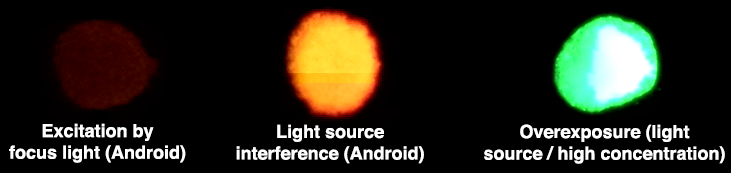
<style>
.page{position:relative;width:731px;height:173px;background:#000000}
.page>*{position:absolute;margin:0}
.t1{font:18px "Helvetica-Bold";color:#ffffff}
</style>
<div class="page">
<p class="t1" style="left:9px;top:123px;width:177px;height:40px;text-align:center">Excitation by<br>focus light (Android)</p>
<p class="t1" style="left:236px;top:124px;width:188px;height:40px;text-align:center">Light source<br>interference (Android)</p>
<p class="t1" style="left:484px;top:124px;width:241px;height:40px;text-align:center">Overexposure (light<br>source / high concentration)</p>
</div>
